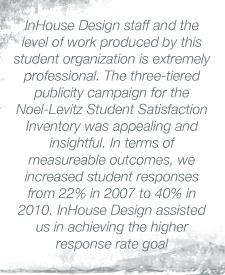
<style>
.page{position:relative;width:225px;height:275px;background:#ffffff}
.page>*{position:absolute;margin:0}
.t1{font:14px "HelveticaNeue-LightItalic";color:#626d71}
</style>
<div class="page">
<p class="t1" style="left:13px;top:20px;width:198px;height:232px;text-align:center">InHouse Design staff and the level of work produced by this student organization is extremely professional. The three-tiered publicity campaign for the Noel-Levitz Student Satisfaction Inventory was appealing and insightful. In terms of measureable outcomes, we increased student responses from 22% in 2007 to 40% in 2010. InHouse Design assisted us in achieving the higher response rate goal</p>
</div>
